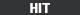
<style>
.page{position:relative;width:80px;height:15px;background:#333436}
.page>*{position:absolute;margin:0}
.t1{font:11px "HeadlineR-HM";letter-spacing:-0.02em;color:#ffffff}
</style>
<div class="page">
<p class="t1" style="left:30px;top:3px;width:20px;height:10px">HIT</p>
</div>
